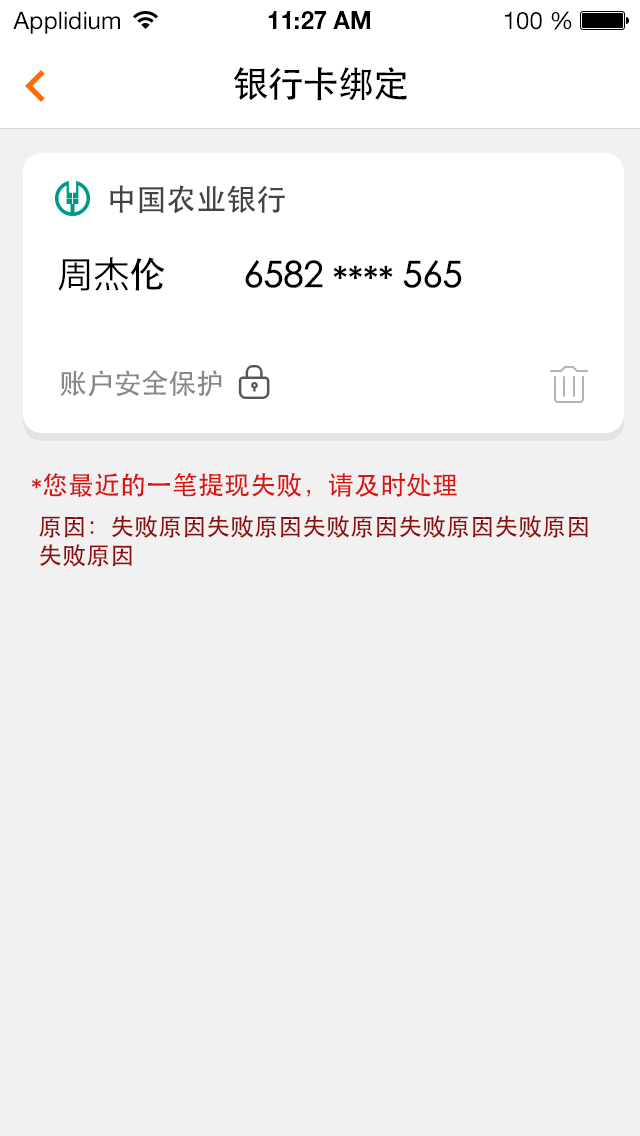
<style>
.page{position:relative;width:640px;height:1136px;background:#f1f1f1}
.page>*{position:absolute;margin:0}
.t1{font:24px "HelveticaNeueLTStd-Roman";color:#000000}
.t2{font:24px "HelveticaNeueLTStd-Bd";color:#000000}
.t3{font:36px "STHeiti";letter-spacing:-0.025em;color:#000000}
.t4{font:30px "STHeiti";color:#444444}
.t5{font:36px "KozGoPr6N-Regular";color:#000000}
.t6{font:36px "AdobeHeitiStd-Regular";color:#000000}
.t7{font:36px "STHeiti";color:#000000}
.t8{font:28px "STHeiti";letter-spacing:-0.025em;color:#888888}
.t9{font:26px "STHeiti";color:#da1313}
.t10{font:24px "STHeiti";color:#8c0f0f}
</style>
<div class="page">
<p class="t1" style="left:13px;top:11px;width:107px;height:23px">Applidium</p>
<p class="t2" style="left:268px;top:11px;width:102px;height:18px">11:27 AM</p>
<p class="t1" style="left:505px;top:11px;width:67px;height:19px">100 %</p>
<p class="t3" style="left:234px;top:67px;width:173px;height:34px">银行卡绑定</p>
<p class="t4" style="left:110px;top:185px;width:175px;height:29px">中国农业银行</p>
<p class="t5" style="left:58px;top:257px;width:107px;height:34px">周杰<span class="t6">伦</span></p>
<p class="t7" style="left:245px;top:260px;width:217px;height:28px">6582 **** 565</p>
<p class="t8" style="left:60px;top:370px;width:162px;height:27px">账户安全保护</p>
<p class="t9" style="left:31px;top:473px;width:426px;height:24px">*您最近的一笔提现失败，请及时处理</p>
<p class="t10" style="left:39px;top:515px;width:549px;height:52px">原因：失败原因失败原因失败原因失败原因失败原因<br>失败原因</p>
</div>
